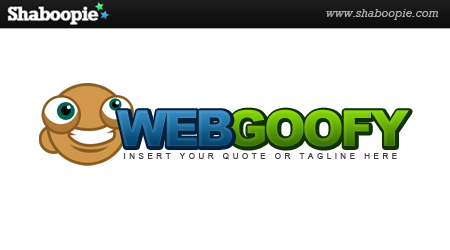
<style>
.page{position:relative;width:450px;height:250px;background:#ffffff}
.page>*{position:absolute;margin:0}
.t1{font:50px "Arial-Black";letter-spacing:-0.075em;text-transform:uppercase}
.t2{font:8.3px "ArialMT";letter-spacing:0.4em;color:#414141;text-transform:uppercase}
</style>
<div class="page">
<p class="t1" style="left:117px;top:110px;width:115px;height:36px">WEB</p>
<p class="t1" style="left:228px;top:109px;width:181px;height:38px">GOOFY</p>
<p class="t2" style="left:124px;top:153px;width:273px;height:7px">INSERT YOUR QUOTE OR TAGLINE HERE</p>
</div>
